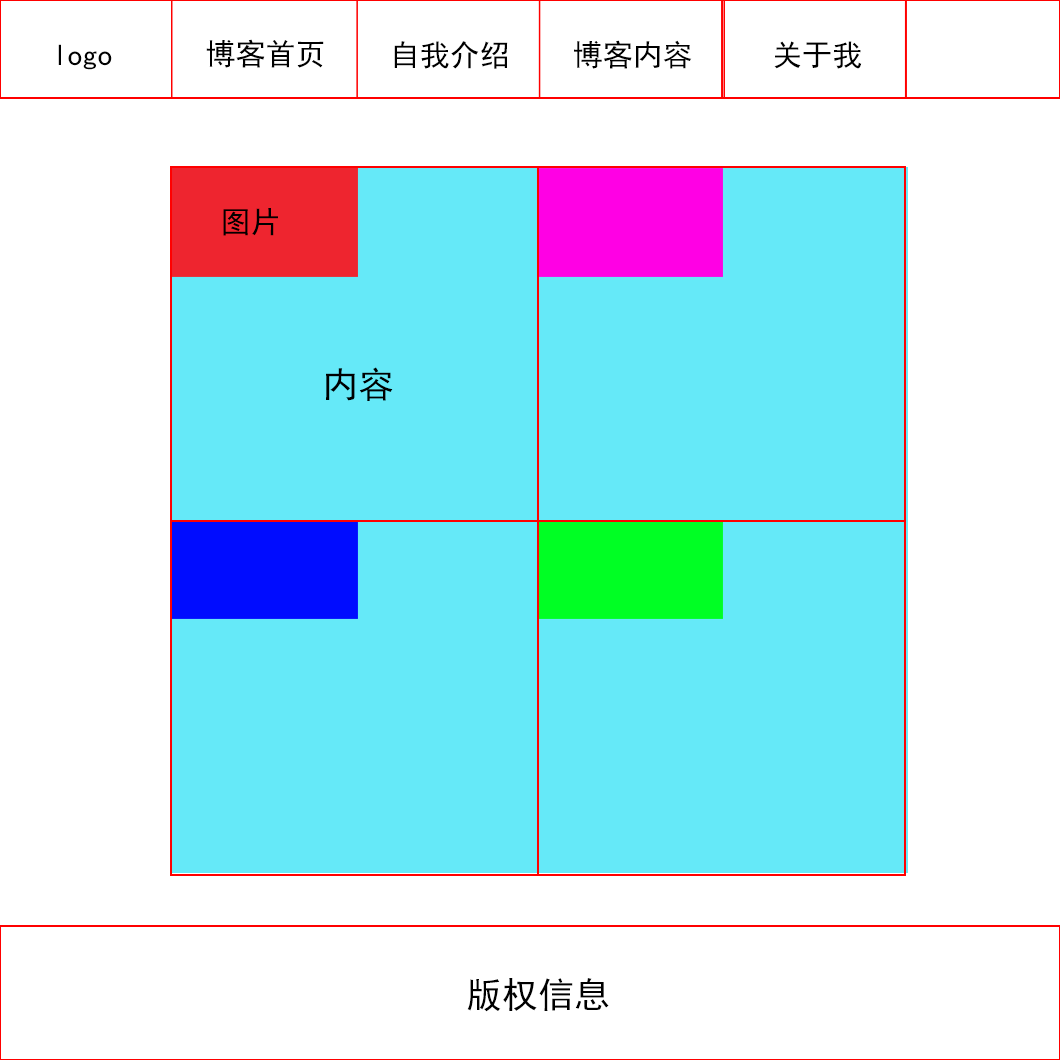
<style>
.page{position:relative;width:1060px;height:1060px;background:#ffffff}
.page>*{position:absolute;margin:0}
.t1{font:30px "SimHei";color:#000000}
.t2{font:36px "SimHei";color:#000000}
</style>
<div class="page">
<p class="t1" style="left:206px;top:39px;width:118px;height:29px">博客首页</p>
<p class="t1" style="left:394px;top:41px;width:114px;height:28px">自我介绍</p>
<p class="t1" style="left:574px;top:40px;width:118px;height:29px">博客内容</p>
<p class="t1" style="left:774px;top:41px;width:88px;height:28px">关于我</p>
<p class="t1" style="left:58px;top:44px;width:54px;height:26px">logo</p>
<p class="t1" style="left:223px;top:208px;width:55px;height:28px">图片</p>
<p class="t2" style="left:326px;top:367px;width:67px;height:34px">内容</p>
<p class="t2" style="left:467px;top:978px;width:142px;height:34px">版权信息</p>
</div>
